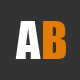
<style>
.page{position:relative;width:80px;height:80px;background:#333333}
.page>*{position:absolute;margin:0}
.t1{font:48px "Impact";color:#ffffff}
.t2{font:48px "Impact";color:#e37b00}
</style>
<div class="page">
<p class="t1" style="left:15px;top:21px;width:51px;height:38px">A<span class="t2">B</span></p>
</div>
